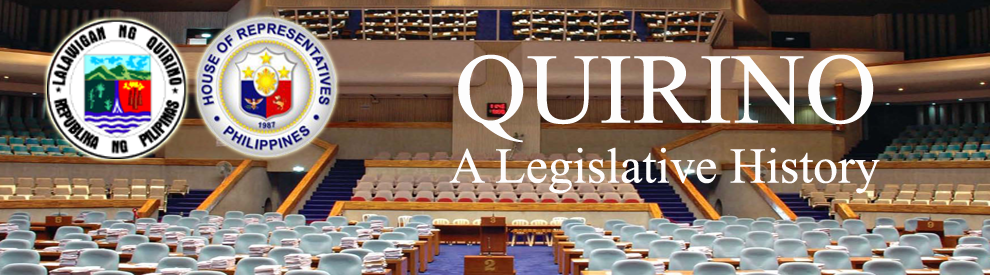
<style>
.page{position:relative;width:990px;height:275px}
.page>*{position:absolute;margin:0}
.t1{font:50px "TimesNewRomanPSMT";color:#fdfcfc}
.t2{font:100px "TimesNewRomanPSMT";color:#fdfdfd}
</style>
<div class="page">
<p class="t1" style="left:449px;top:54px;width:431px;height:140px;text-align:center"><span class="t2">QUIRINO<br></span>A Legislative History</p>
</div>
